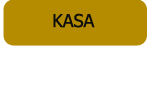
<style>
.page{position:relative;width:150px;height:100px;background:#ffffff}
.page>*{position:absolute;margin:0}
.t1{font:18px "Tahoma";color:#0e0e0d}
</style>
<div class="page">
<p class="t1" style="left:53px;top:13px;width:42px;height:15px">KASA</p>
</div>
